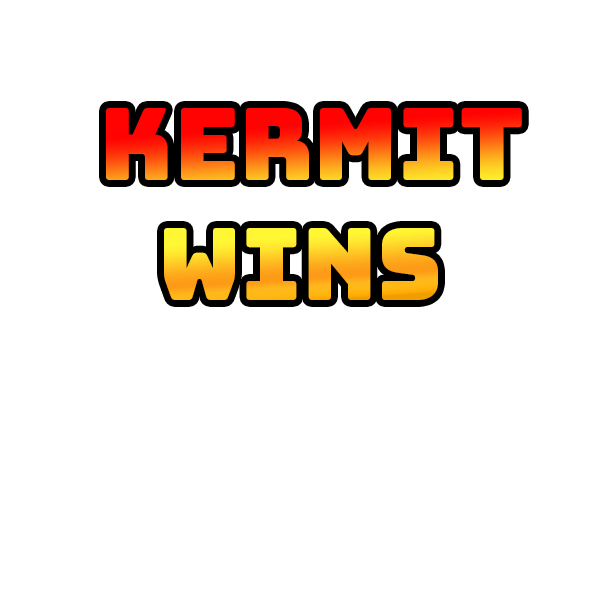
<style>
.page{position:relative;width:600px;height:600px;background:#ffffff}
.page>*{position:absolute;margin:0}
.t1{font:100px "Bungee-Regular"}
</style>
<div class="page">
<p class="t1" style="left:106px;top:108px;width:416px;height:192px;text-align:center">Kermit Wins</p>
</div>
